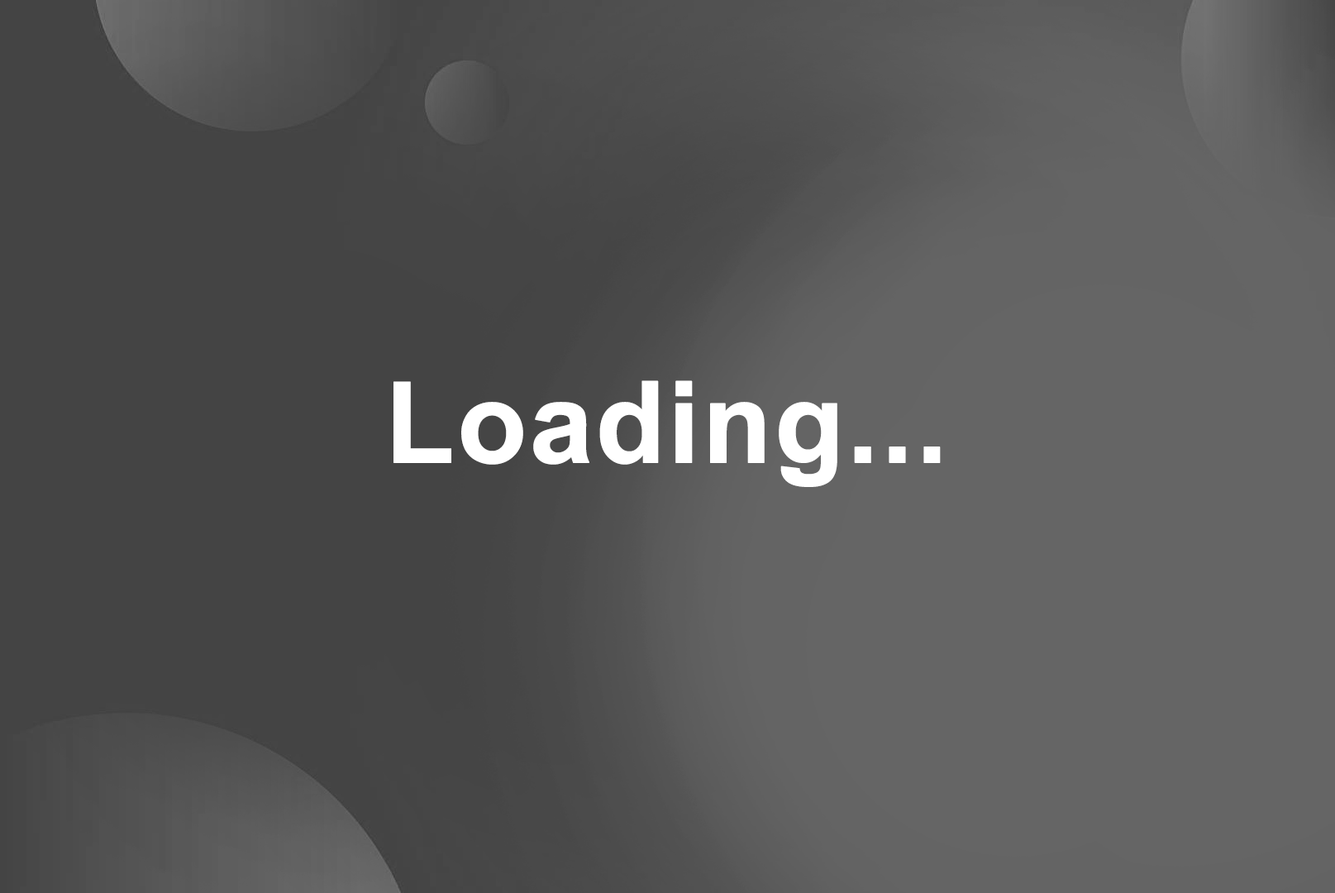
<style>
.page{position:relative;width:1335px;height:893px;background:#444444}
.page>*{position:absolute;margin:0}
.t1{font:113.2px "Arial-BoldMT";color:#ffffff;font-weight:bold}
</style>
<div class="page">
<p class="t1" style="left:394px;top:380px;width:547px;height:107px">Loading...</p>
</div>
